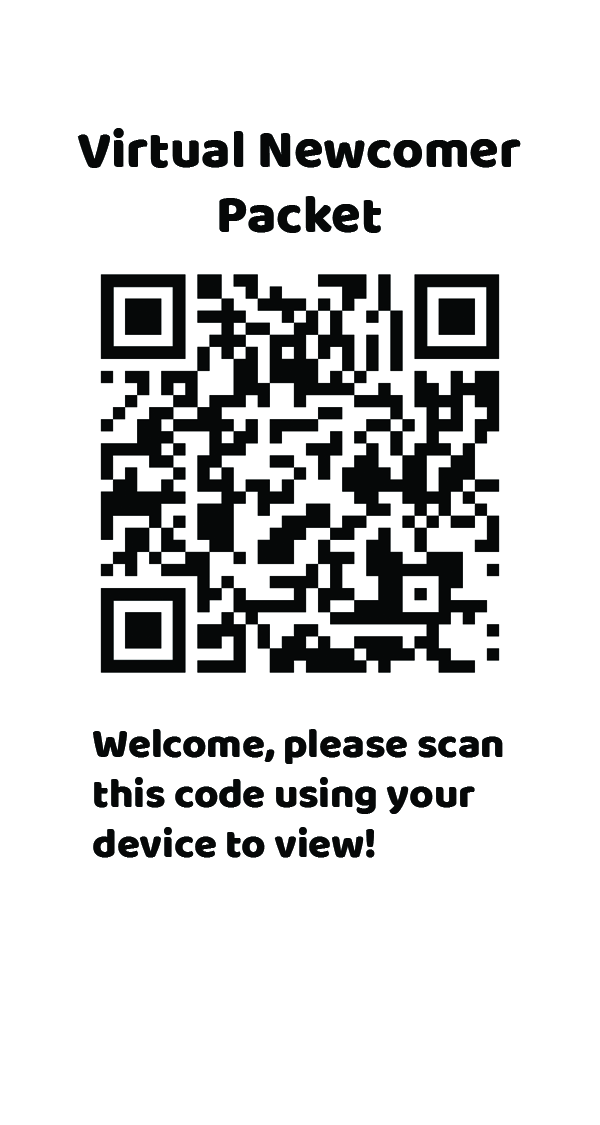
<style>
.page{position:relative;width:600px;height:1125px;background:#ffffff}
.page>*{position:absolute;margin:0}
.t1{font:54.2px "Baloo-Regular";color:#060808}
.t2{font:41.7px "Baloo-Regular";color:#060808}
</style>
<div class="page">
<p class="t1" style="left:77px;top:128px;width:444px;height:105px;text-align:center">Virtual Newcomer<br>Packet</p>
<p class="t2" style="left:93px;top:729px;width:410px;height:129px">Welcome, please scan <br>this code using your <br>device to view!</p>
</div>
